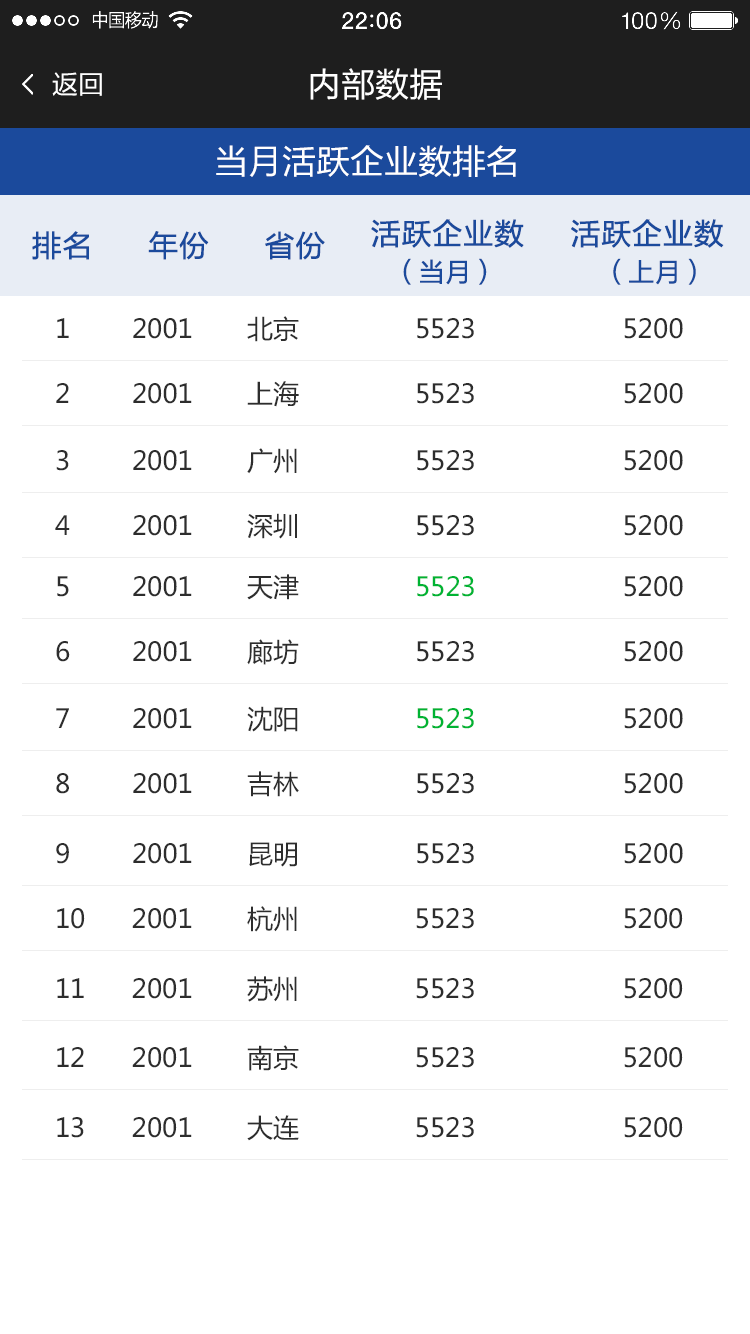
<style>
.page{position:relative;width:750px;height:1334px;background:#ffffff}
.page>*{position:absolute;margin:0}
.t1{font:26px "FZLTHJW--GB1-0";color:#ffffff}
.t2{font:34px "FZLTHJW--GB1-0";color:#ffffff}
.t3{font:30px "FZLTHJW--GB1-0";color:#1b4a9c;font-weight:bold}
.t4{font:26px "FZLTHJW--GB1-0";color:#1b4a9c;font-weight:bold}
.t5{font:26px "MicrosoftYaHei";color:#2d2d2d}
.t6{font:26px "MicrosoftYaHei";color:#00b333}
</style>
<div class="page">
<p class="t1" style="left:52px;top:72px;width:50px;height:24px">返回</p>
<p class="t2" style="left:310px;top:68px;width:132px;height:32px">内部数据</p>
<p class="t2" style="left:216px;top:145px;width:300px;height:32px">当月活跃企业数排名</p>
<p class="t3" style="left:371px;top:219px;width:353px;height:29px">活跃企业数     活跃企业数</p>
<p class="t3" style="left:32px;top:231px;width:293px;height:29px">排名      年份      省份</p>
<p class="t4" style="left:403px;top:258px;width:293px;height:27px">（当月）             （上月）</p>
<p class="t5" style="left:57px;top:316px;width:626px;height:26px">1        2001       北京               5523                   5200</p>
<p class="t5" style="left:56px;top:381px;width:627px;height:26px">2        2001       上海               5523                   5200</p>
<p class="t5" style="left:56px;top:448px;width:627px;height:26px">3        2001       广州               5523                   5200</p>
<p class="t5" style="left:55px;top:513px;width:628px;height:26px">4        2001       深圳               5523                   5200</p>
<p class="t5" style="left:57px;top:574px;width:626px;height:26px">5        2001       天津               <span class="t6">5523</span>                   5200</p>
<p class="t5" style="left:56px;top:639px;width:627px;height:26px">6        2001       廊坊               5523                   5200</p>
<p class="t5" style="left:56px;top:706px;width:627px;height:26px">7        2001       沈阳               <span class="t6">5523</span>                   5200</p>
<p class="t5" style="left:56px;top:771px;width:627px;height:26px">8        2001       吉林               5523                   5200</p>
<p class="t5" style="left:56px;top:842px;width:627px;height:25px">9        2001       昆明               5523                   5200</p>
<p class="t5" style="left:57px;top:906px;width:626px;height:26px">10      2001       杭州               5523                   5200</p>
<p class="t5" style="left:57px;top:976px;width:626px;height:26px">11      2001       苏州               5523                   5200</p>
<p class="t5" style="left:57px;top:1045px;width:626px;height:26px">12      2001       南京               5523                   5200</p>
<p class="t5" style="left:57px;top:1115px;width:626px;height:26px">13      2001       大连               5523                   5200</p>
</div>
